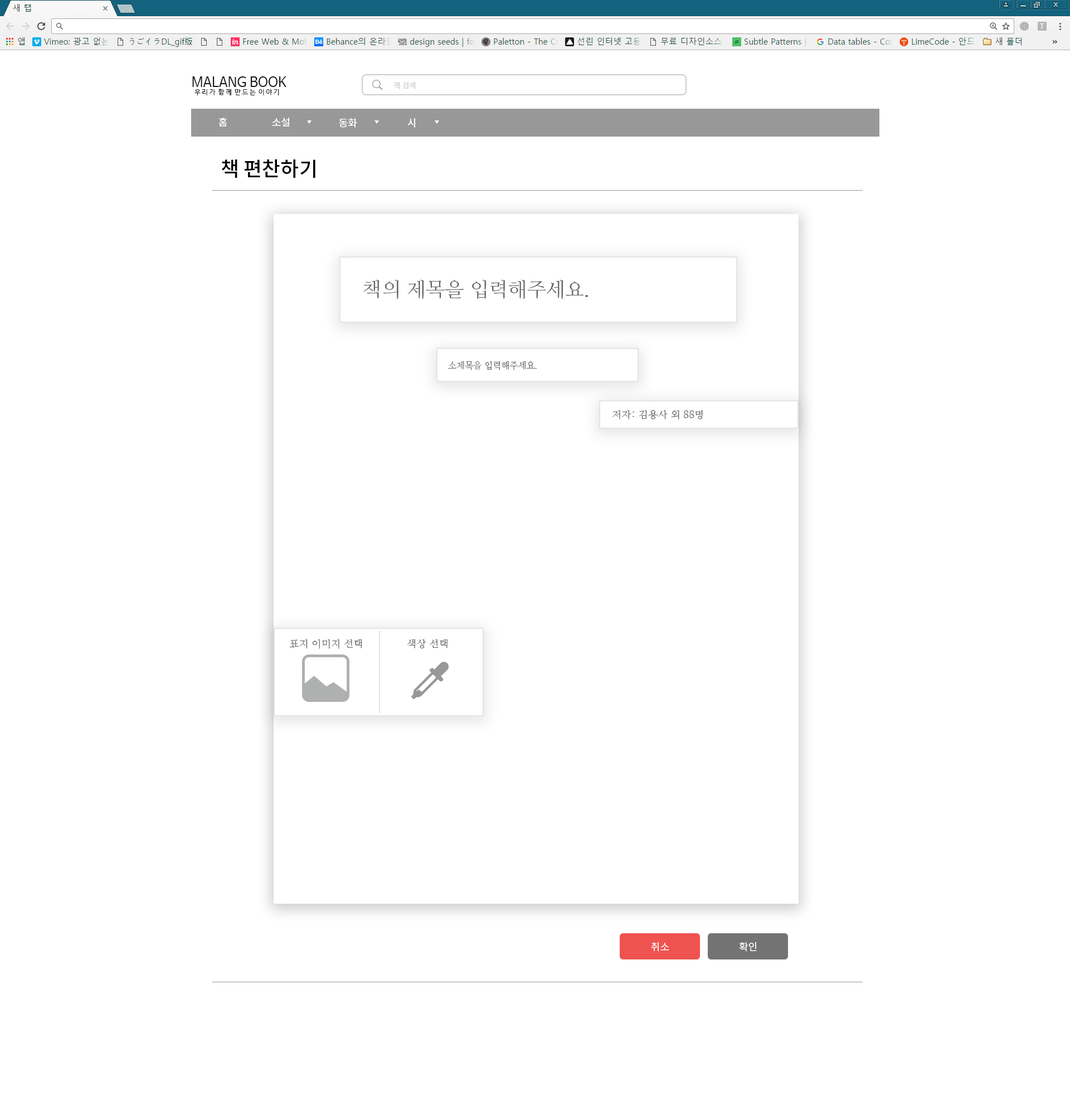
<style>
.page{position:relative;width:1070px;height:1115px;background:#ffffff}
.page>*{position:absolute;margin:0}
.t1{font:6.7px "NanumBarunGothic";color:#191918}
.t2{font:13.4px "NanumBarunGothic";color:#191918}
.t3{font:7.8px "NanumBarunGothicBold";color:#d2d2d2}
.t4{font:10px "NotoSansCJKkr-Medium";color:#ffffff}
.t5{font:7.8px "NanumBarunGothicBold";color:#f3f3f3}
.t6{font:20.1px "NotoSansCJKkr-Medium";color:#000000}
.t7{font:20.1px "NanumMyeongjo";color:#646464}
.t8{font:8.9px "NanumMyeongjo";color:#646464}
.t9{font:10.3px "NanumMyeongjo";color:#646464}
.t10{font:10px "NotoSansCJKkr-Regular";color:#ffffff}
</style>
<div class="page">
<p class="t1" style="left:192px;top:76px;width:94px;height:19px"><span class="t2">MALANG BOOK<br></span>  우 리 가  함 께  만 드 는  이 야 기</p>
<p class="t3" style="left:393px;top:82px;width:23px;height:7px">책 검색</p>
<p class="t4" style="left:219px;top:118px;width:8px;height:8px">홈</p>
<p class="t4" style="left:272px;top:118px;width:18px;height:8px">소설</p>
<p class="t4" style="left:339px;top:118px;width:18px;height:10px">동화</p>
<p class="t4" style="left:407px;top:118px;width:8px;height:10px"><span class="t5"> </span>시</p>
<p class="t6" style="left:221px;top:159px;width:94px;height:19px">책 편찬하기</p>
<p class="t7" style="left:363px;top:280px;width:225px;height:19px">책의 제목을 입력해주세요.</p>
<p class="t8" style="left:448px;top:361px;width:89px;height:9px">소제목을 입력해주세요.</p>
<p class="t9" style="left:612px;top:410px;width:91px;height:10px">저자: 김용사 외 88명</p>
<p class="t9" style="left:289px;top:639px;width:73px;height:10px">표지 이미지 선택</p>
<p class="t9" style="left:407px;top:639px;width:40px;height:9px">색상 선택</p>
<p class="t10" style="left:651px;top:942px;width:18px;height:9px">취소</p>
<p class="t10" style="left:739px;top:941px;width:18px;height:10px">확인</p>
</div>
